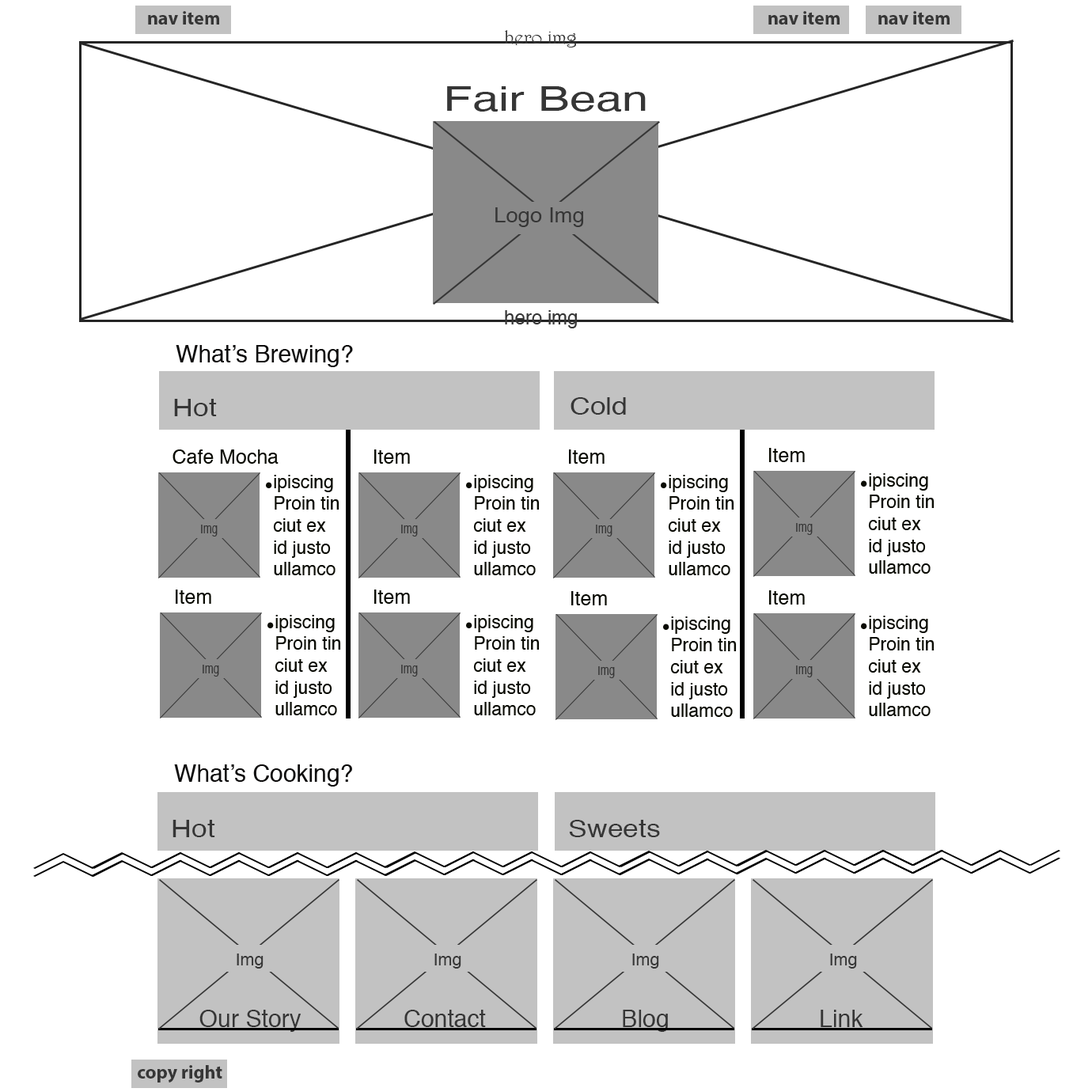
<style>
.page{position:relative;width:1092px;height:1092px;background:#ffffff}
.page>*{position:absolute;margin:0}
.t1{font:19px "MyriadPro-Bold";color:#363636}
.t2{font:19px "Harrington";color:#363636}
.t3{font:33.7px "Helvetica";color:#363636;scale:1.4 1}
.t4{font:20.6px "Helvetica";color:#363636;scale:1.06 1}
.t5{font:19px "Helvetica";color:#363636}
.t6{font:23.7px "Helvetica";color:#0e0d0d}
.t7{font:24.3px "Helvetica";color:#363636;scale:1.16 1}
.t8{font:24.4px "Helvetica";color:#363636;scale:1.16 1}
.t9{font:19.6px "Helvetica";color:#0a0b03}
.t10{font:18.2px "Helvetica";color:#0a0b03}
.t11{font:31.7px "MyriadPro-Bold";color:#0a0b03}
.t12{font:12.7px "Helvetica";color:#363636;scale:0.82 1}
.t13{font:21.7px "MyriadPro-Bold";color:#363636;scale:0.82 1}
.t14{font:16.6px "Helvetica";color:#363636}
.t15{font:30.8px "MyriadPro-Bold";color:#363636}
.t16{font:24.2px "Helvetica";color:#363636}
</style>
<div class="page">
<p class="t1" style="left:148px;top:11px;width:71px;height:14px">nav item</p>
<p class="t1" style="left:768px;top:11px;width:72px;height:14px">nav item</p>
<p class="t1" style="left:878px;top:11px;width:72px;height:14px">nav item</p>
<p class="t2" style="left:505px;top:30px;width:72px;height:17px"><span class="t1">      </span>hero img</p>
<p class="t3" style="left:447px;top:86px;width:199px;height:26px">Fair Bean</p>
<p class="t4" style="left:495px;top:207px;width:88px;height:20px">Logo Img</p>
<p class="t5" style="left:505px;top:310px;width:72px;height:18px"><span class="t1">      </span>hero img</p>
<p class="t6" style="left:176px;top:345px;width:177px;height:22px">What’s Brewing?</p>
<p class="t7" style="left:174px;top:399px;width:43px;height:17px">Hot</p>
<p class="t8" style="left:571px;top:397px;width:55px;height:18px">Cold</p>
<p class="t9" style="left:173px;top:449px;width:106px;height:15px">Cafe Mocha</p>
<p class="t9" style="left:374px;top:449px;width:36px;height:15px">Item</p>
<p class="t9" style="left:569px;top:449px;width:36px;height:15px">Item</p>
<p class="t9" style="left:769px;top:448px;width:36px;height:14px">Item</p>
<p class="t10" style="left:868px;top:473px;width:67px;height:101px">ipiscing<br>Proin tin<br>ciut ex <br>id justo<br>ullamco</p>
<p class="t11" style="left:266px;top:482px;width:6px;height:6px">.</p>
<p class="t10" style="left:273px;top:475px;width:66px;height:100px">ipiscing<br>Proin tin<br>ciut ex <br>id justo<br>ullamco</p>
<p class="t11" style="left:466px;top:482px;width:6px;height:6px">.</p>
<p class="t10" style="left:473px;top:475px;width:67px;height:100px">ipiscing<br>Proin tin<br>ciut ex <br>id justo<br>ullamco</p>
<p class="t11" style="left:661px;top:482px;width:6px;height:6px">.</p>
<p class="t10" style="left:668px;top:475px;width:66px;height:100px">ipiscing<br>Proin tin<br>ciut ex <br>id justo<br>ullamco</p>
<p class="t11" style="left:861px;top:480px;width:6px;height:7px">.</p>
<p class="t12" style="left:201px;top:525px;width:17px;height:11px"><span class="t13">   </span>Img</p>
<p class="t12" style="left:401px;top:525px;width:17px;height:11px"><span class="t13">   </span>Img</p>
<p class="t12" style="left:596px;top:525px;width:16px;height:11px"><span class="t13">   </span>Img</p>
<p class="t12" style="left:796px;top:523px;width:17px;height:12px"><span class="t13">   </span>Img</p>
<p class="t9" style="left:176px;top:590px;width:35px;height:14px">Item</p>
<p class="t9" style="left:374px;top:590px;width:36px;height:14px">Item</p>
<p class="t9" style="left:571px;top:591px;width:36px;height:14px">Item</p>
<p class="t9" style="left:769px;top:590px;width:36px;height:15px">Item</p>
<p class="t10" style="left:275px;top:615px;width:66px;height:100px">ipiscing<br>Proin tin<br>ciut ex <br>id justo<br>ullamco</p>
<p class="t10" style="left:473px;top:615px;width:67px;height:100px">ipiscing<br>Proin tin<br>ciut ex <br>id justo<br>ullamco</p>
<p class="t10" style="left:670px;top:616px;width:67px;height:101px">ipiscing<br>Proin tin<br>ciut ex <br>id justo<br>ullamco</p>
<p class="t10" style="left:868px;top:616px;width:67px;height:100px">ipiscing<br>Proin tin<br>ciut ex <br>id justo<br>ullamco</p>
<p class="t11" style="left:267px;top:622px;width:7px;height:6px">.</p>
<p class="t11" style="left:466px;top:622px;width:6px;height:6px">.</p>
<p class="t11" style="left:663px;top:624px;width:6px;height:6px">.</p>
<p class="t11" style="left:861px;top:623px;width:6px;height:6px">.</p>
<p class="t12" style="left:203px;top:665px;width:16px;height:12px"><span class="t13">   </span>Img</p>
<p class="t12" style="left:401px;top:665px;width:17px;height:12px"><span class="t13">   </span>Img</p>
<p class="t12" style="left:796px;top:665px;width:17px;height:12px"><span class="t13">   </span>Img</p>
<p class="t12" style="left:598px;top:666px;width:17px;height:12px"><span class="t13">   </span>Img</p>
<p class="t6" style="left:174px;top:764px;width:178px;height:23px">What’s Cooking?</p>
<p class="t7" style="left:173px;top:820px;width:42px;height:17px">Hot</p>
<p class="t7" style="left:569px;top:820px;width:91px;height:17px">Sweets</p>
<p class="t14" style="left:237px;top:954px;width:27px;height:15px"><span class="t15">   </span>Img</p>
<p class="t14" style="left:434px;top:954px;width:27px;height:15px"><span class="t15">   </span>Img</p>
<p class="t14" style="left:632px;top:954px;width:27px;height:15px"><span class="t15">   </span>Img</p>
<p class="t14" style="left:830px;top:954px;width:27px;height:15px"><span class="t15">   </span>Img</p>
<p class="t16" style="left:199px;top:1010px;width:102px;height:22px">Our Story</p>
<p class="t16" style="left:404px;top:1010px;width:82px;height:17px">Contact</p>
<p class="t16" style="left:623px;top:1010px;width:45px;height:22px">Blog</p>
<p class="t16" style="left:821px;top:1010px;width:42px;height:17px">Link</p>
<p class="t1" style="left:138px;top:1065px;width:84px;height:17px">copy right</p>
</div>
